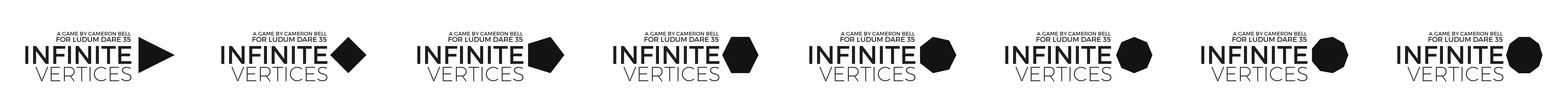
<style>
.page{position:relative;width:1568px;height:110px;background:#ffffff}
.page>*{position:absolute;margin:0}
.t1{font:7px "Montserrat-Regular";color:#1e1e1e}
.t2{font:5.3px "Montserrat-Regular";color:#1e1e1e}
.t3{font:25.5px "Montserrat-Regular";color:#1e1e1e}
.t4{font:20.4px "Montserrat-UltraLight";color:#1e1e1e}
</style>
<div class="page">
<p class="t1" style="left:57px;top:37px;width:74px;height:5px">FOR LUDUM DARE 35</p>
<p class="t2" style="left:57px;top:32px;width:74px;height:4px">A GAME BY CAMERON BELL</p>
<p class="t1" style="left:253px;top:37px;width:74px;height:5px">FOR LUDUM DARE 35</p>
<p class="t2" style="left:253px;top:32px;width:74px;height:4px">A GAME BY CAMERON BELL</p>
<p class="t1" style="left:449px;top:37px;width:74px;height:5px">FOR LUDUM DARE 35</p>
<p class="t2" style="left:449px;top:32px;width:74px;height:4px">A GAME BY CAMERON BELL</p>
<p class="t1" style="left:645px;top:37px;width:74px;height:5px">FOR LUDUM DARE 35</p>
<p class="t2" style="left:645px;top:32px;width:74px;height:4px">A GAME BY CAMERON BELL</p>
<p class="t1" style="left:841px;top:37px;width:74px;height:5px">FOR LUDUM DARE 35</p>
<p class="t2" style="left:841px;top:32px;width:74px;height:4px">A GAME BY CAMERON BELL</p>
<p class="t1" style="left:1037px;top:37px;width:74px;height:5px">FOR LUDUM DARE 35</p>
<p class="t2" style="left:1037px;top:32px;width:74px;height:4px">A GAME BY CAMERON BELL</p>
<p class="t1" style="left:1233px;top:37px;width:74px;height:5px">FOR LUDUM DARE 35</p>
<p class="t2" style="left:1233px;top:32px;width:74px;height:4px">A GAME BY CAMERON BELL</p>
<p class="t1" style="left:1429px;top:37px;width:74px;height:5px">FOR LUDUM DARE 35</p>
<p class="t2" style="left:1429px;top:32px;width:74px;height:4px">A GAME BY CAMERON BELL</p>
<p class="t3" style="left:25px;top:46px;width:106px;height:18px">INFINITE</p>
<p class="t3" style="left:221px;top:46px;width:106px;height:18px">INFINITE</p>
<p class="t3" style="left:417px;top:46px;width:106px;height:18px">INFINITE</p>
<p class="t3" style="left:613px;top:46px;width:106px;height:18px">INFINITE</p>
<p class="t3" style="left:809px;top:46px;width:106px;height:18px">INFINITE</p>
<p class="t3" style="left:1005px;top:46px;width:106px;height:18px">INFINITE</p>
<p class="t3" style="left:1201px;top:46px;width:106px;height:18px">INFINITE</p>
<p class="t3" style="left:1397px;top:46px;width:106px;height:18px">INFINITE</p>
<p class="t4" style="left:35px;top:67px;width:96px;height:14px">VERTICES</p>
<p class="t4" style="left:231px;top:67px;width:96px;height:14px">VERTICES</p>
<p class="t4" style="left:427px;top:67px;width:96px;height:14px">VERTICES</p>
<p class="t4" style="left:623px;top:67px;width:96px;height:14px">VERTICES</p>
<p class="t4" style="left:819px;top:67px;width:96px;height:14px">VERTICES</p>
<p class="t4" style="left:1015px;top:67px;width:96px;height:14px">VERTICES</p>
<p class="t4" style="left:1211px;top:67px;width:96px;height:14px">VERTICES</p>
<p class="t4" style="left:1407px;top:67px;width:96px;height:14px">VERTICES</p>
</div>
